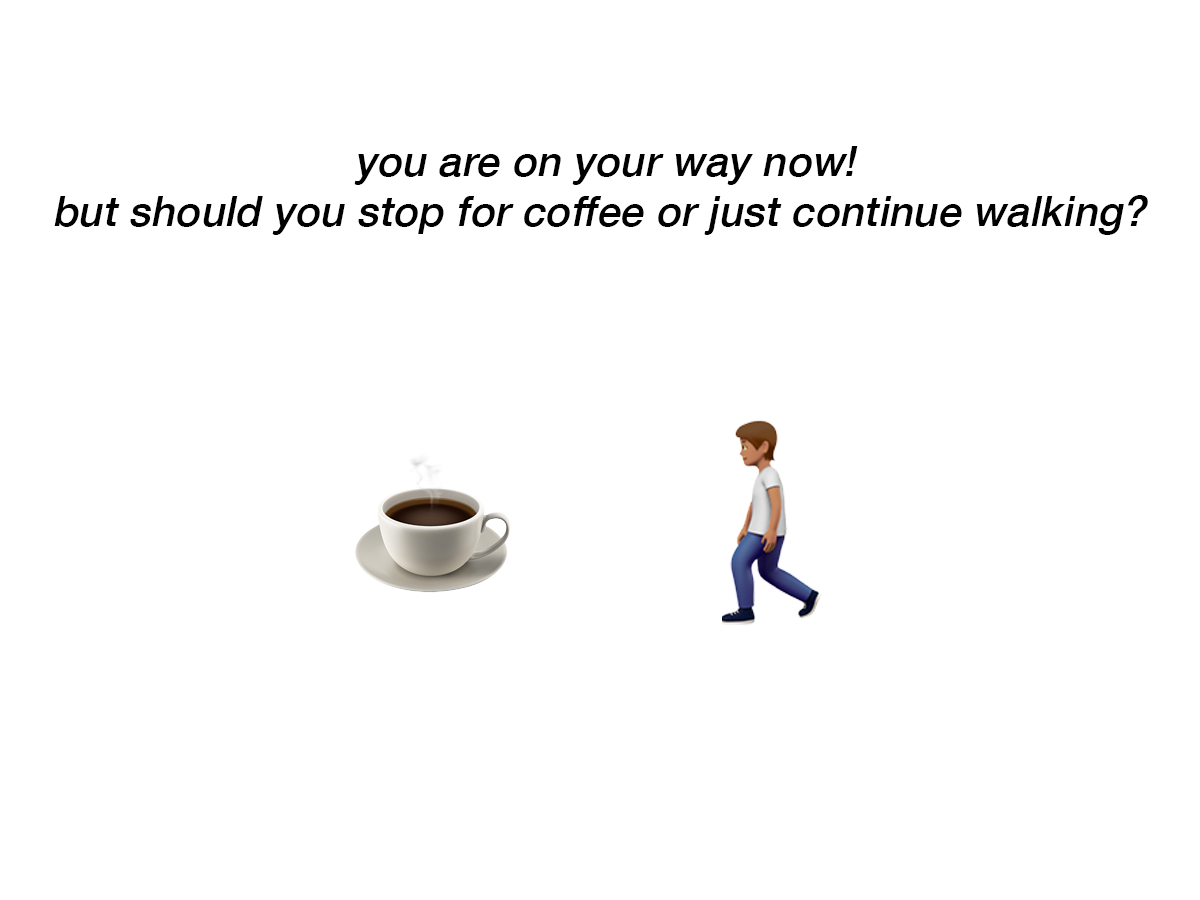
<style>
.page{position:relative;width:1200px;height:900px;background:#ffffff}
.page>*{position:absolute;margin:0}
.t1{font:41.7px "HelveticaNeue-Medium";letter-spacing:0.01em;color:#000000;font-style:italic}
</style>
<div class="page">
<p class="t1" style="left:54px;top:146px;width:1094px;height:89px;text-align:center">you are on your way now!<br>but should you stop for coffee or just continue walking?</p>
</div>
